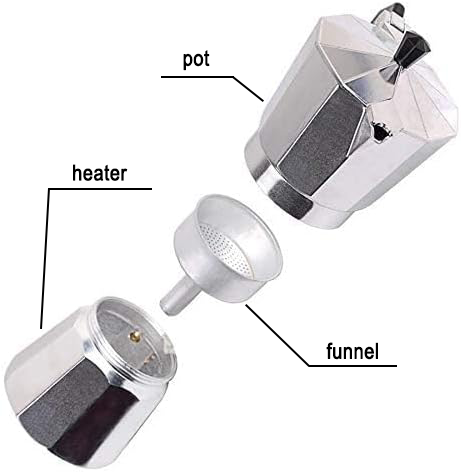
<style>
.page{position:relative;width:461px;height:472px;background:#ffffff}
.page>*{position:absolute;margin:0}
.t1{font:21.6px "ArialMT";letter-spacing:0.01em;color:#000000;font-weight:bold;scale:0.83 1}
</style>
<div class="page">
<p class="t1" style="left:183px;top:50px;width:27px;height:21px">pot</p>
<p class="t1" style="left:73px;top:164px;width:55px;height:17px">heater</p>
<p class="t1" style="left:326px;top:342px;width:52px;height:18px">funnel</p>
</div>
